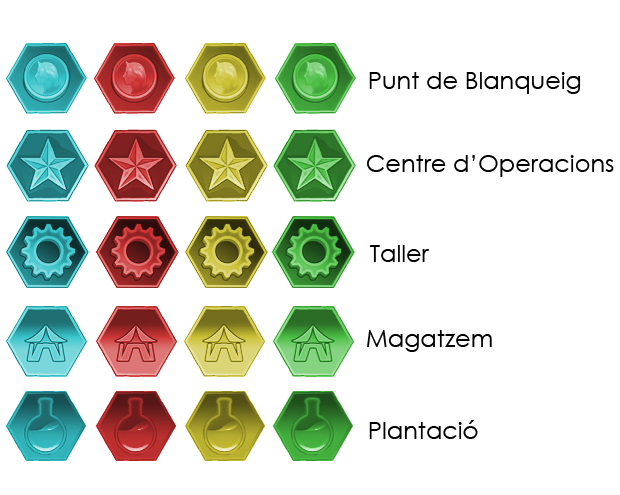
<style>
.page{position:relative;width:620px;height:495px;background:#ffffff}
.page>*{position:absolute;margin:0}
.t1{font:24px "CenturyGothic";color:#000000}
</style>
<div class="page">
<p class="t1" style="left:369px;top:72px;width:212px;height:22px">Punt de Blanqueig</p>
<p class="t1" style="left:367px;top:155px;width:247px;height:22px">Centre d’Operacions</p>
<p class="t1" style="left:370px;top:245px;width:59px;height:17px">Taller</p>
<p class="t1" style="left:367px;top:330px;width:125px;height:22px">Magatzem</p>
<p class="t1" style="left:369px;top:420px;width:109px;height:19px">Plantació</p>
</div>
